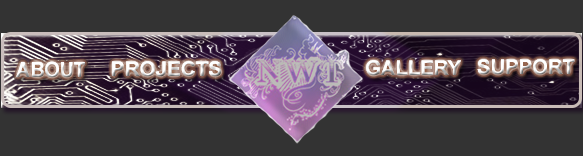
<style>
.page{position:relative;width:583px;height:156px;background:#333333}
.page>*{position:absolute;margin:0}
.t1{font:21.1px "Arial-BoldMT";scale:0.93 1}
.t2{font:20.2px "Arial-BoldMT"}
.t3{font:20.2px "Arial-BoldMT";color:#ffffff}
</style>
<div class="page">
<p class="t1" style="left:16px;top:61px;width:69px;height:17px">ABOUT</p>
<p class="t1" style="left:16px;top:61px;width:69px;height:17px">ABOUT</p>
<p class="t2" style="left:112px;top:61px;width:109px;height:16px">PROJECTS</p>
<p class="t2" style="left:112px;top:61px;width:109px;height:16px">PROJECTS</p>
<p class="t2" style="left:366px;top:60px;width:95px;height:16px">GALLERY</p>
<p class="t2" style="left:366px;top:60px;width:95px;height:16px">GALLERY</p>
<p class="t3" style="left:477px;top:59px;width:98px;height:16px">SUPPORT</p>
<p class="t3" style="left:477px;top:59px;width:98px;height:16px">SUPPORT</p>
</div>
